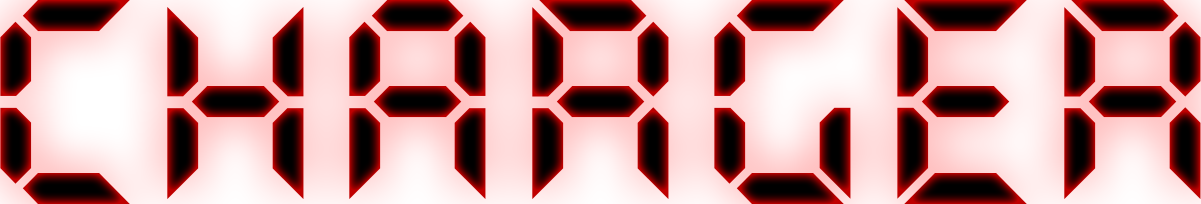
<style>
.page{position:relative;width:1201px;height:204px}
.page>*{position:absolute;margin:0}
.t1{font:291.7px "QuartzMS"}
</style>
<div class="page">
<p class="t1" style="left:0px;top:0px;width:1201px;height:204px">Charger</p>
</div>
